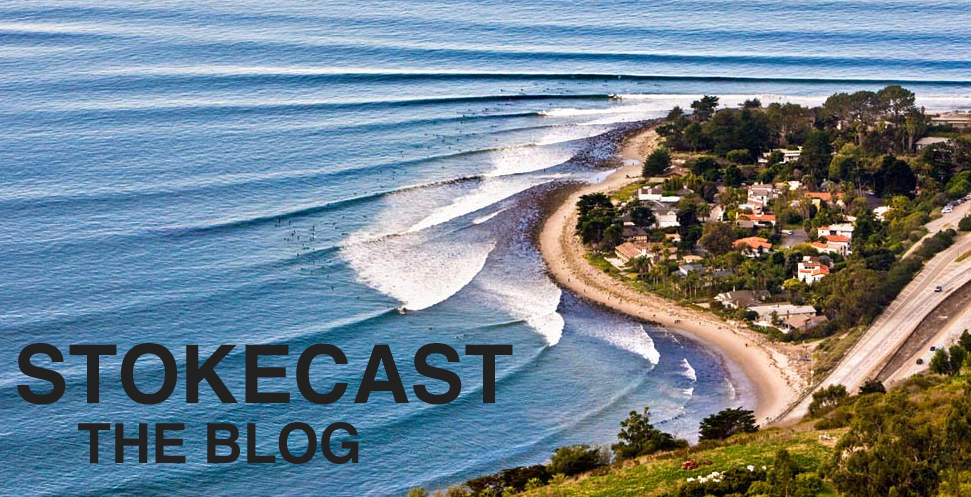
<style>
.page{position:relative;width:971px;height:497px}
.page>*{position:absolute;margin:0}
.t1{font:81.1px "Helvetica-Bold";color:#212121}
.t2{font:55.2px "Helvetica-Bold";color:#212121}
</style>
<div class="page">
<p class="t1" style="left:17px;top:343px;width:496px;height:62px">STOKECAST</p>
<p class="t2" style="left:78px;top:422px;width:281px;height:42px">THE BLOG</p>
</div>
